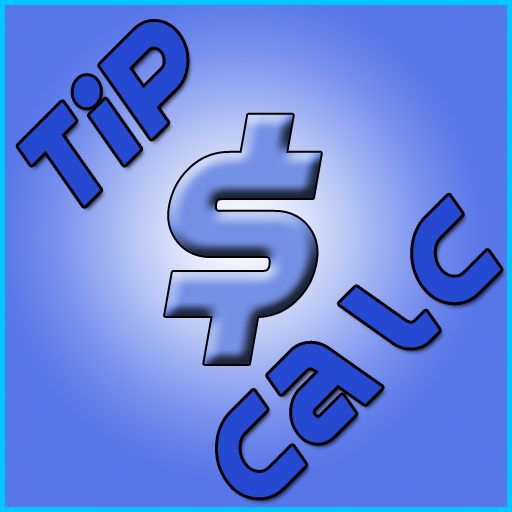
<style>
.page{position:relative;width:512px;height:512px}
.page>*{position:absolute;margin:0}
.t1{font:140px "SpinCycle";letter-spacing:0.05em;color:#2549d0;font-style:italic}
.t2{font:400px "SpinCycle";letter-spacing:0.05em;font-style:italic}
</style>
<div class="page">
<p class="t1" style="left:18px;top:22px;width:169px;height:184px;rotate:-45deg">Tip</p>
<p class="t2" style="left:165px;top:114px;width:156px;height:250px">$</p>
<p class="t1" style="left:218px;top:195px;width:283px;height:303px;rotate:-45deg">Calc</p>
</div>
